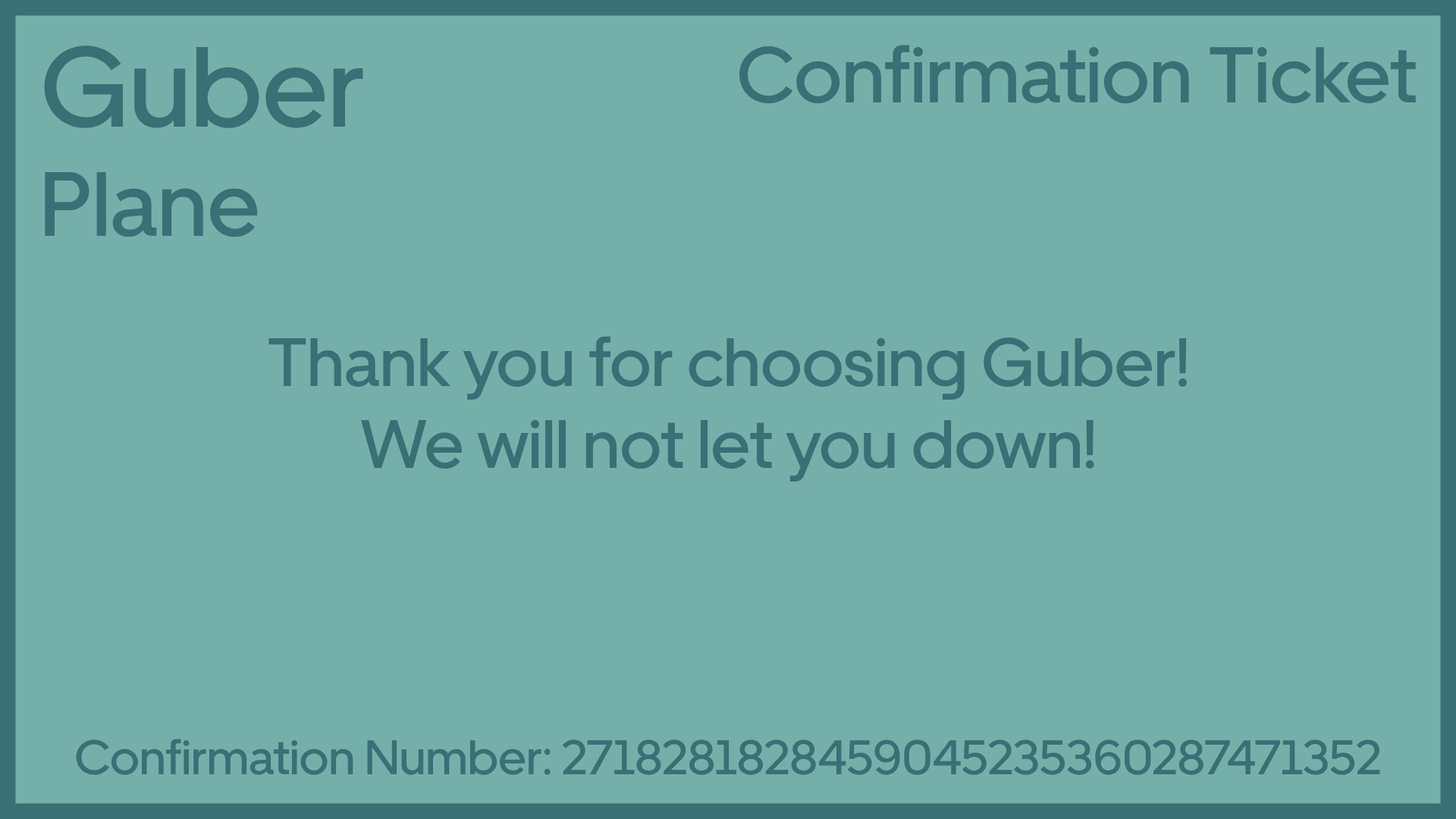
<style>
.page{position:relative;width:1456px;height:819px;background:#75afaa}
.page>*{position:absolute;margin:0}
.t1{font:113.7px "UberMove-Medium";color:#396f75}
.t2{font:91px "UberMove-Medium";color:#396f75}
.t3{font:78.9px "UberMove-Medium";color:#396f75}
.t4{font:68.2px "UberMove-Medium";color:#396f75}
.t5{font:48.5px "UberMove-Medium";color:#396f75}
</style>
<div class="page">
<p class="t1" style="left:44px;top:45px;width:319px;height:192px">Guber<br><span class="t2">Plane</span></p>
<p class="t3" style="left:739px;top:45px;width:677px;height:59px">Confirmation Ticket</p>
<p class="t4" style="left:268px;top:336px;width:919px;height:146px;text-align:center">Thank you for choosing Guber!<br>We will not let you down!</p>
<p class="t5" style="left:76px;top:739px;width:1304px;height:36px">Confirmation Number: 2718281828459045235360287471352</p>
</div>
